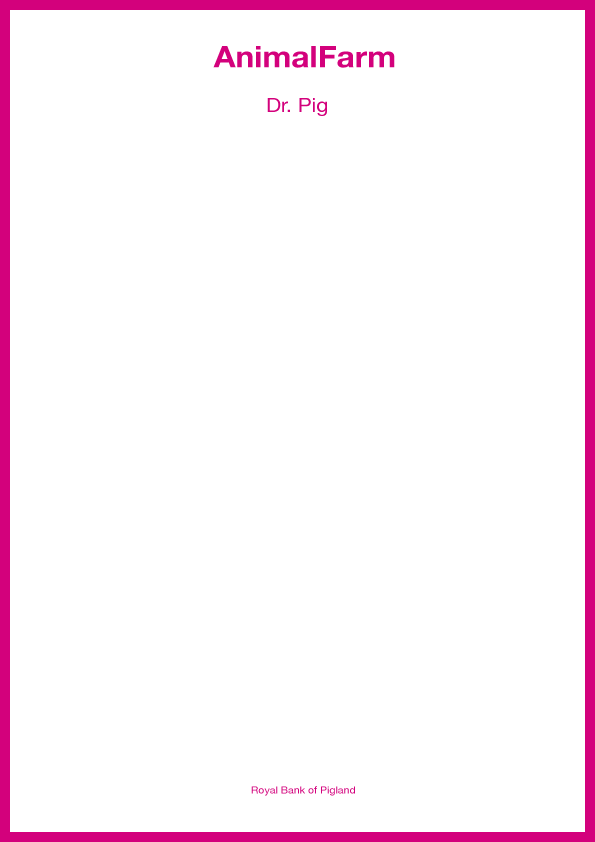
<style>
.page{position:relative;width:595px;height:842px;background:#ffffff}
.page>*{position:absolute;margin:0}
.t1{font:29.7px "HelveticaNeue-Bold";color:#d3017c;scale:1.07 1}
.t2{font:19.8px "HelveticaNeue";color:#d3017c;scale:1.07 1}
.t3{font:9.9px "HelveticaNeue";color:#d3017c;scale:1.07 1}
</style>
<div class="page">
<p class="t1" style="left:213px;top:46px;width:182px;height:22px">AnimalFarm</p>
<p class="t2" style="left:267px;top:98px;width:60px;height:18px">Dr. Pig</p>
<p class="t3" style="left:251px;top:786px;width:104px;height:10px">Royal Bank of Pigland</p>
</div>
